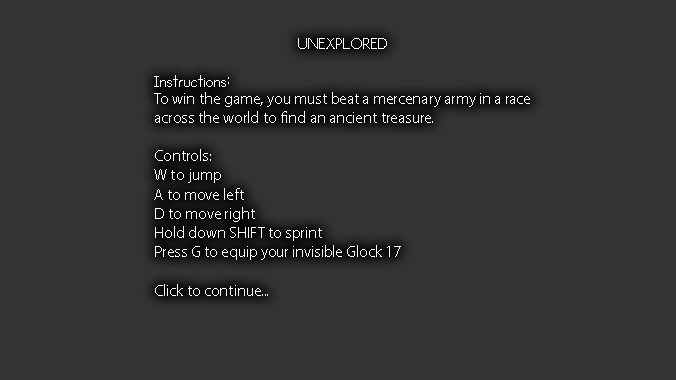
<style>
.page{position:relative;width:676px;height:380px;background:#333333}
.page>*{position:absolute;margin:0}
.t1{font:16px "MyriadPro-Regular";color:#ffffff}
.t2{font:16px "Unexplored";color:#ffffff}
</style>
<div class="page">
<p class="t1" style="left:154px;top:38px;width:376px;height:258px;text-align:center"><span class="t2">UNEXPLORED<br><br>Instructions</span>:<br>To win the game, you must beat a mercenary army in a race across the world to find an ancient treasure.<br><br>Controls:<br>W to jump<br>A to move left<br>D to move right<br>Hold down SHIFT to sprint<br>Press G to equip your invisible Glock 17<br><br>Click to continue...</p>
</div>
